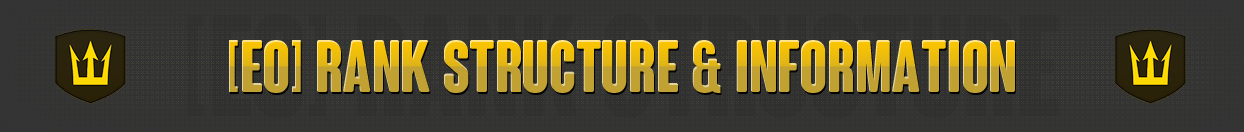
<style>
.page{position:relative;width:1244px;height:132px;background:#333333}
.page>*{position:absolute;margin:0}
.t1{font:72px "ColunaRounded-CondensedBold"}
</style>
<div class="page">
<p class="t1" style="left:229px;top:40px;width:786px;height:53px">[eo] rank structure &amp; information</p>
</div>
